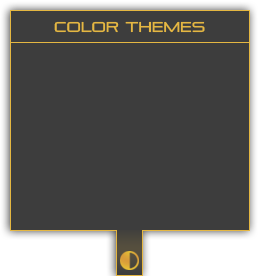
<style>
.page{position:relative;width:260px;height:276px;background:#3d3d3d}
.page>*{position:absolute;margin:0}
.t1{font:13.9px "PirulenRg-Regular";color:#e5b742}
</style>
<div class="page">
<p class="t1" style="left:54px;top:21px;width:151px;height:12px">color Themes</p>
</div>
